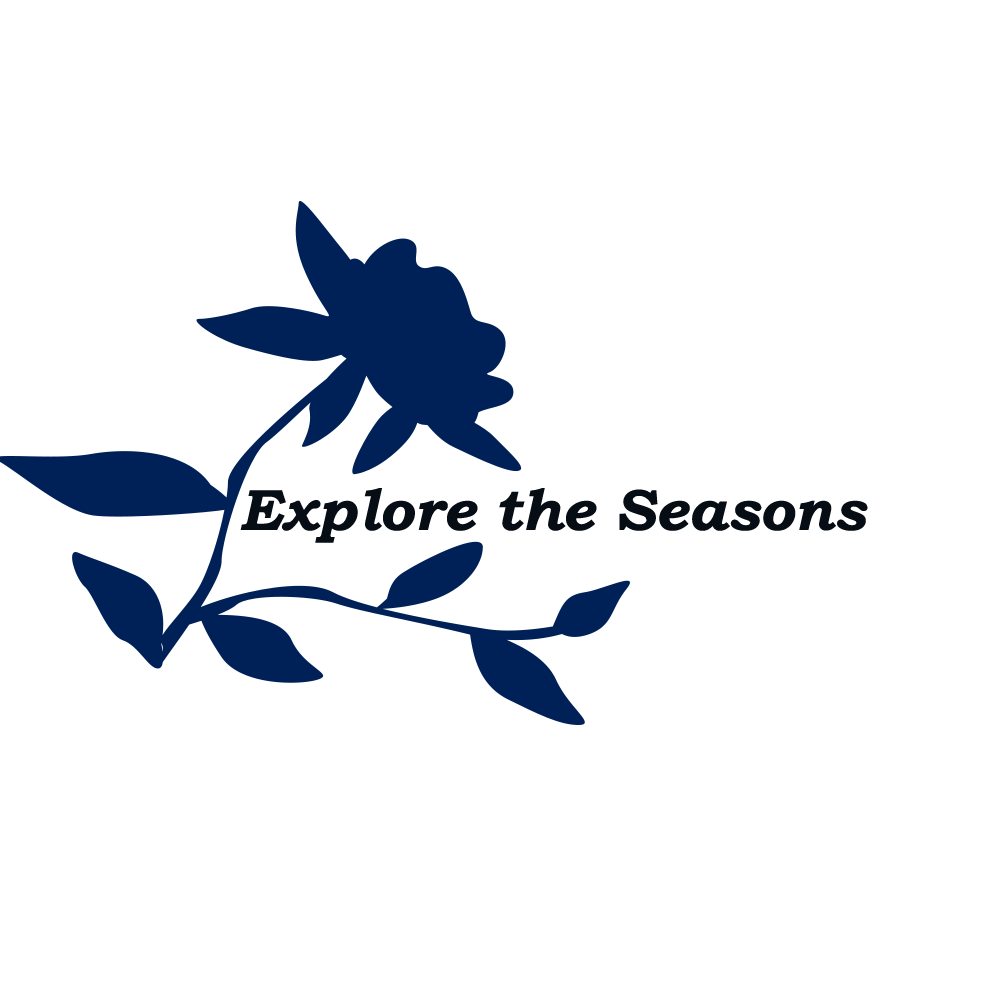
<style>
.page{position:relative;width:1000px;height:1000px;background:#ffffff}
.page>*{position:absolute;margin:0}
.t1{font:58.3px "BookmanOldStyle-BoldItalic";color:#070d14}
</style>
<div class="page">
<p class="t1" style="left:240px;top:488px;width:628px;height:55px">Explore the Seasons</p>
</div>
